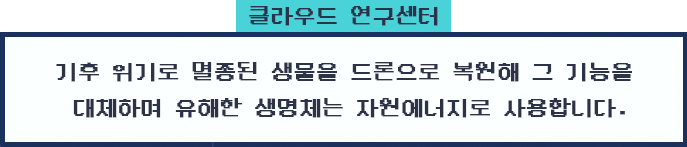
<style>
.page{position:relative;width:687px;height:147px;background:#fbffff}
.page>*{position:absolute;margin:0}
.t1{font:22px "DungGeunMo";color:#2c3248;font-weight:bold}
.t2{font:22px/36px "DungGeunMo";color:#2c3248;font-weight:bold}
</style>
<div class="page">
<p class="t1" style="left:249px;top:6px;width:189px;height:20px">클라우드 연구센터</p>
<p class="t2" style="left:56px;top:62px;width:576px;height:56px;text-align:center">기후 위기로 멸종된 생물을 드론으로 복원해 그 기능을 <br>대체하며 유해한 생명체는 자원에너지로 사용합니다.</p>
</div>
